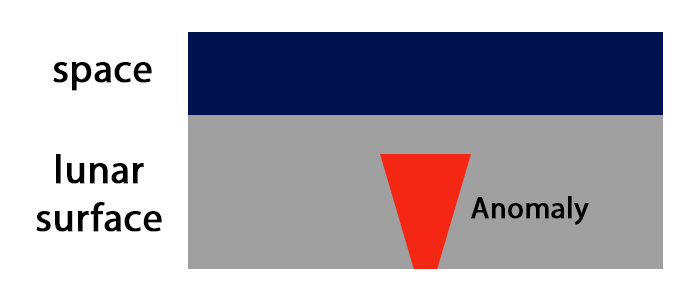
<style>
.page{position:relative;width:700px;height:300px;background:#ffffff}
.page>*{position:absolute;margin:0}
.t1{font:40px "MyriadPro-Regular";color:#000000;font-weight:bold}
.t2{font:30px "MyriadPro-Regular";color:#000000;font-weight:bold}
</style>
<div class="page">
<p class="t1" style="left:53px;top:62px;width:99px;height:29px">space</p>
<p class="t1" style="left:36px;top:154px;width:126px;height:78px;text-align:center">lunar<br>surface</p>
<p class="t2" style="left:471px;top:196px;width:118px;height:29px">Anomaly</p>
</div>
